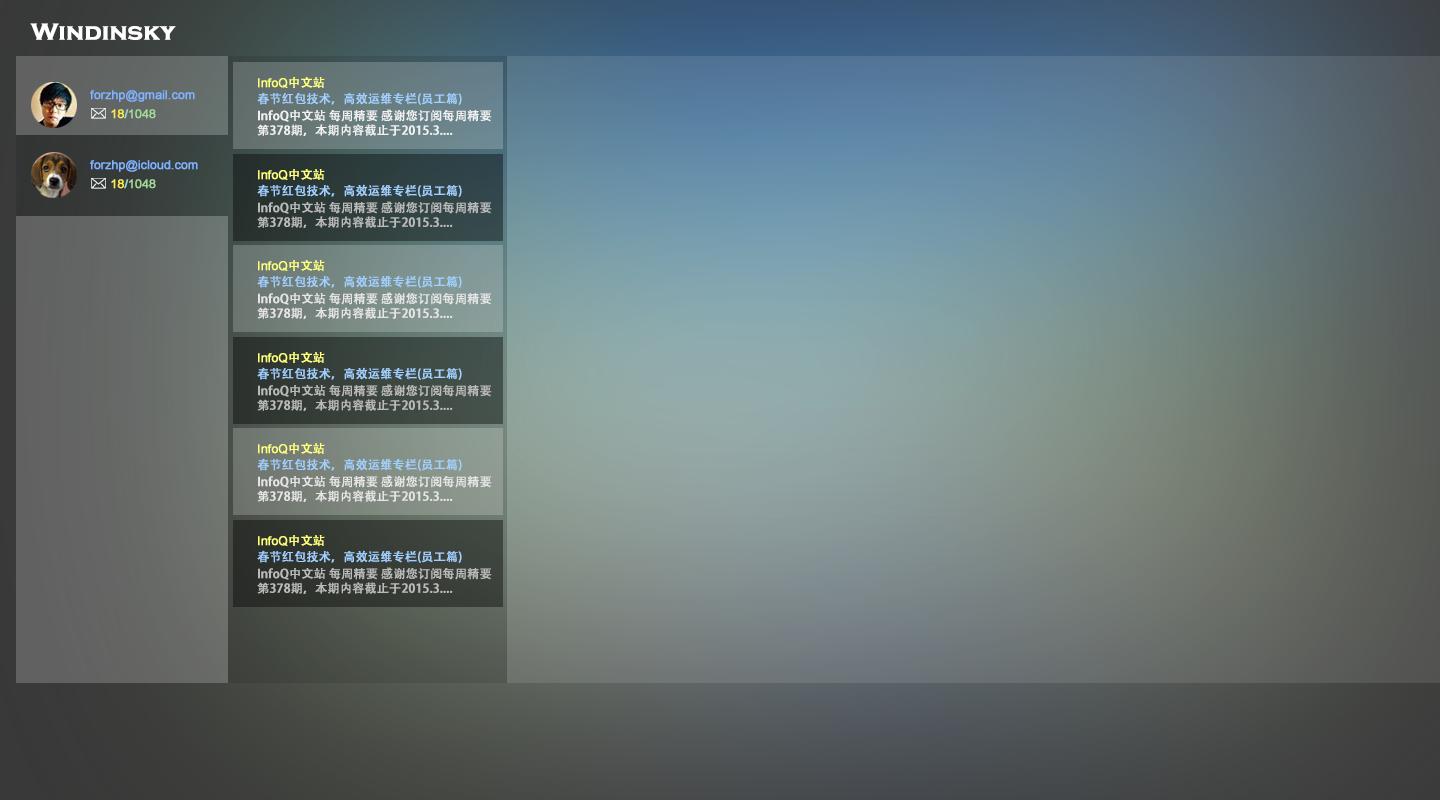
<style>
.page{position:relative;width:1440px;height:800px}
.page>*{position:absolute;margin:0}
.t1{font:24px "CopperplateGothic-Bold";letter-spacing:-0.002em;color:#ffffff;font-weight:bold}
.t2{font:12px "ArialMT";letter-spacing:-0.002em;color:#fdff7d;font-weight:bold}
.t3{font:12px "AdobeHeitiStd-Regular";letter-spacing:-0.002em;color:#fdff7d;font-weight:bold}
.t4{font:12px "ArialMT";letter-spacing:-0.002em;color:#81b3ff;font-weight:bold}
.t5{font:12px "AdobeHeitiStd-Regular";letter-spacing:-0.002em;color:#a2d0ff;font-weight:bold}
.t6{font:12px "ArialMT";letter-spacing:-0.002em;color:#a2da96;font-weight:bold}
.t7{font:12px "ArialMT";letter-spacing:-0.002em;color:#faec50;font-weight:bold}
.t8{font:12px "ArialMT";letter-spacing:-0.002em;color:#96dacc;font-weight:bold}
.t9{font:12px "AdobeHeitiStd-Regular";letter-spacing:-0.002em;color:#f0f0f0;font-weight:bold}
.t10{font:12px "AdobeHeitiStd-Regular";letter-spacing:-0.002em;color:#b9b9b9;font-weight:bold}
.t11{font:12px "AdobeHeitiStd-Regular";letter-spacing:-0.002em;color:#e4e4e4;font-weight:bold}
</style>
<div class="page">
<p class="t1" style="left:30px;top:23px;width:146px;height:17px">Windinsky</p>
<p class="t2" style="left:258px;top:77px;width:67px;height:11px">InfoQ<span class="t3">中文站</span></p>
<p class="t4" style="left:90px;top:90px;width:105px;height:12px">forzhp@gmail.com</p>
<p class="t5" style="left:257px;top:92px;width:205px;height:13px">春节红包技术，高效运维专栏(员工篇)</p>
<p class="t6" style="left:111px;top:109px;width:45px;height:10px"><span class="t7">18</span><span class="t8">/</span>1048</p>
<p class="t9" style="left:257px;top:109px;width:235px;height:27px">InfoQ中文站 每周精要 感谢您订阅每周精要<br>第378期，本期内容截止于2015.3....</p>
<p class="t4" style="left:90px;top:160px;width:108px;height:12px">forzhp@icloud.com</p>
<p class="t2" style="left:258px;top:169px;width:67px;height:11px">InfoQ<span class="t3">中文站</span></p>
<p class="t6" style="left:111px;top:179px;width:45px;height:10px"><span class="t7">18</span><span class="t8">/</span>1048</p>
<p class="t5" style="left:257px;top:184px;width:205px;height:13px">春节红包技术，高效运维专栏(员工篇)</p>
<p class="t10" style="left:257px;top:201px;width:235px;height:27px">InfoQ中文站 每周精要 感谢您订阅每周精要<br>第378期，本期内容截止于2015.3....</p>
<p class="t2" style="left:258px;top:260px;width:67px;height:11px">InfoQ<span class="t3">中文站</span></p>
<p class="t5" style="left:257px;top:275px;width:205px;height:13px">春节红包技术，高效运维专栏(员工篇)</p>
<p class="t11" style="left:257px;top:292px;width:235px;height:27px">InfoQ中文站 每周精要 感谢您订阅每周精要<br>第378期，本期内容截止于2015.3....</p>
<p class="t2" style="left:258px;top:352px;width:67px;height:11px">InfoQ<span class="t3">中文站</span></p>
<p class="t5" style="left:257px;top:367px;width:205px;height:13px">春节红包技术，高效运维专栏(员工篇)</p>
<p class="t10" style="left:257px;top:384px;width:235px;height:27px">InfoQ中文站 每周精要 感谢您订阅每周精要<br>第378期，本期内容截止于2015.3....</p>
<p class="t2" style="left:258px;top:443px;width:67px;height:11px">InfoQ<span class="t3">中文站</span></p>
<p class="t5" style="left:257px;top:458px;width:205px;height:13px">春节红包技术，高效运维专栏(员工篇)</p>
<p class="t11" style="left:257px;top:475px;width:235px;height:27px">InfoQ中文站 每周精要 感谢您订阅每周精要<br>第378期，本期内容截止于2015.3....</p>
<p class="t2" style="left:258px;top:535px;width:67px;height:11px">InfoQ<span class="t3">中文站</span></p>
<p class="t5" style="left:257px;top:550px;width:205px;height:13px">春节红包技术，高效运维专栏(员工篇)</p>
<p class="t10" style="left:257px;top:567px;width:235px;height:27px">InfoQ中文站 每周精要 感谢您订阅每周精要<br>第378期，本期内容截止于2015.3....</p>
</div>
